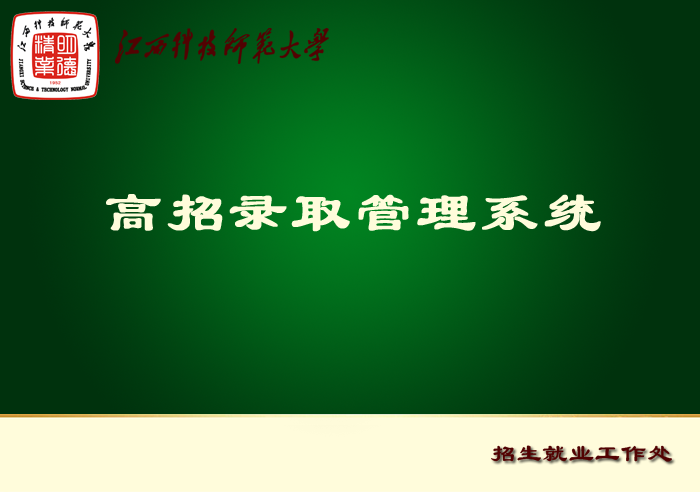
<style>
.page{position:relative;width:700px;height:492px}
.page>*{position:absolute;margin:0}
.t1{font:58.3px "FZLSJW--GB1-0";letter-spacing:0.05em;color:#fffcdb;font-weight:bold}
.t2{font:25px "FZLSJW--GB1-0";letter-spacing:0.05em;color:#520202}
</style>
<div class="page">
<p class="t1" style="left:106px;top:194px;width:495px;height:38px">高招录取管理系统</p>
<p class="t2" style="left:491px;top:445px;width:181px;height:17px">招生就业工作处</p>
</div>
